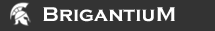
<style>
.page{position:relative;width:215px;height:31px;background:#333333}
.page>*{position:absolute;margin:0}
.t1{font:20.7px "CopperplateGothic-Bold";color:#ffffff}
</style>
<div class="page">
<p class="t1" style="left:43px;top:7px;width:132px;height:15px">BrigantiuM</p>
</div>
